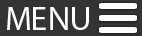
<style>
.page{position:relative;width:142px;height:36px;background:#333333}
.page>*{position:absolute;margin:0}
.t1{font:33.3px "MyriadPro-Regular";color:#ffffff}
</style>
<div class="page">
<p class="t1" style="left:7px;top:7px;width:82px;height:23px">MENU</p>
</div>
